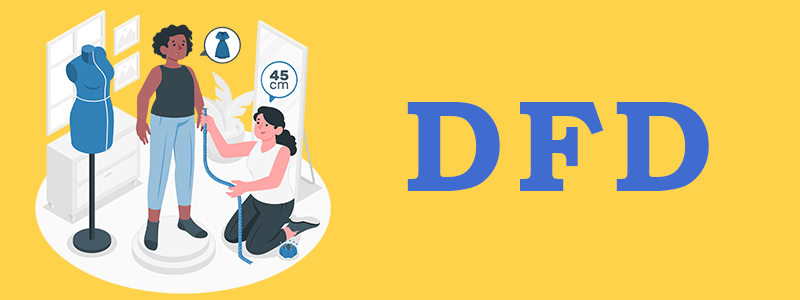
<style>
.page{position:relative;width:800px;height:300px;background:#ffd24c}
.page>*{position:absolute;margin:0}
.t1{font:130px "BookmanOldStyle-Bold";color:#406cd0}
</style>
<div class="page">
<p class="t1" style="left:407px;top:102px;width:302px;height:89px">D    F   D</p>
</div>
